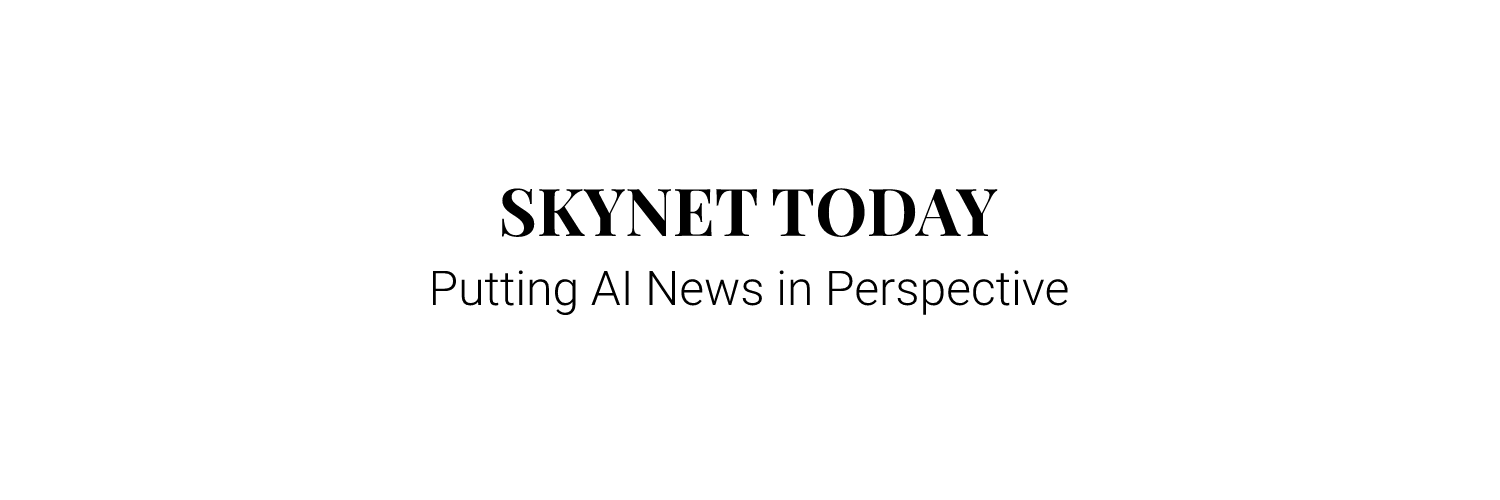
<style>
.page{position:relative;width:1500px;height:500px;background:#ffffff}
.page>*{position:absolute;margin:0}
.t1{font:66px "PlayfairDisplay-Bold";color:#000000}
.t2{font:48px "Roboto-Light";color:#000000}
</style>
<div class="page">
<p class="t1" style="left:502px;top:188px;width:496px;height:49px">SKYNET TODAY</p>
<p class="t2" style="left:432px;top:270px;width:636px;height:46px">Putting AI News in Perspective</p>
</div>
